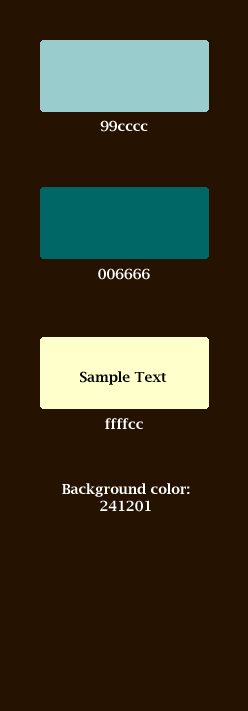
<style>
.page{position:relative;width:248px;height:711px;background:#251201}
.page>*{position:absolute;margin:0}
.t1{font:14px "LucidaBright-Demi";color:#ffffff}
.t2{font:14px "LucidaBright-Demi";color:#050505}
</style>
<div class="page">
<p class="t1" style="left:100px;top:120px;width:48px;height:12px">99cccc</p>
<p class="t1" style="left:98px;top:268px;width:52px;height:12px">006666</p>
<p class="t2" style="left:80px;top:371px;width:87px;height:14px">Sample Text</p>
<p class="t1" style="left:105px;top:418px;width:38px;height:11px">ffffcc</p>
<p class="t1" style="left:62px;top:483px;width:128px;height:29px;text-align:center">Background color:<br>241201</p>
</div>
